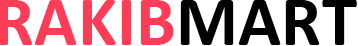
<style>
.page{position:relative;width:358px;height:46px;background:#ffffff}
.page>*{position:absolute;margin:0}
.t1{font:71.4px "Calibri-Bold";color:#fd3d57}
.t2{font:71.4px "Calibri-Bold";color:#000000}
</style>
<div class="page">
<p class="t1" style="left:0px;top:0px;width:357px;height:45px">RAKIB<span class="t2">MART</span></p>
</div>
